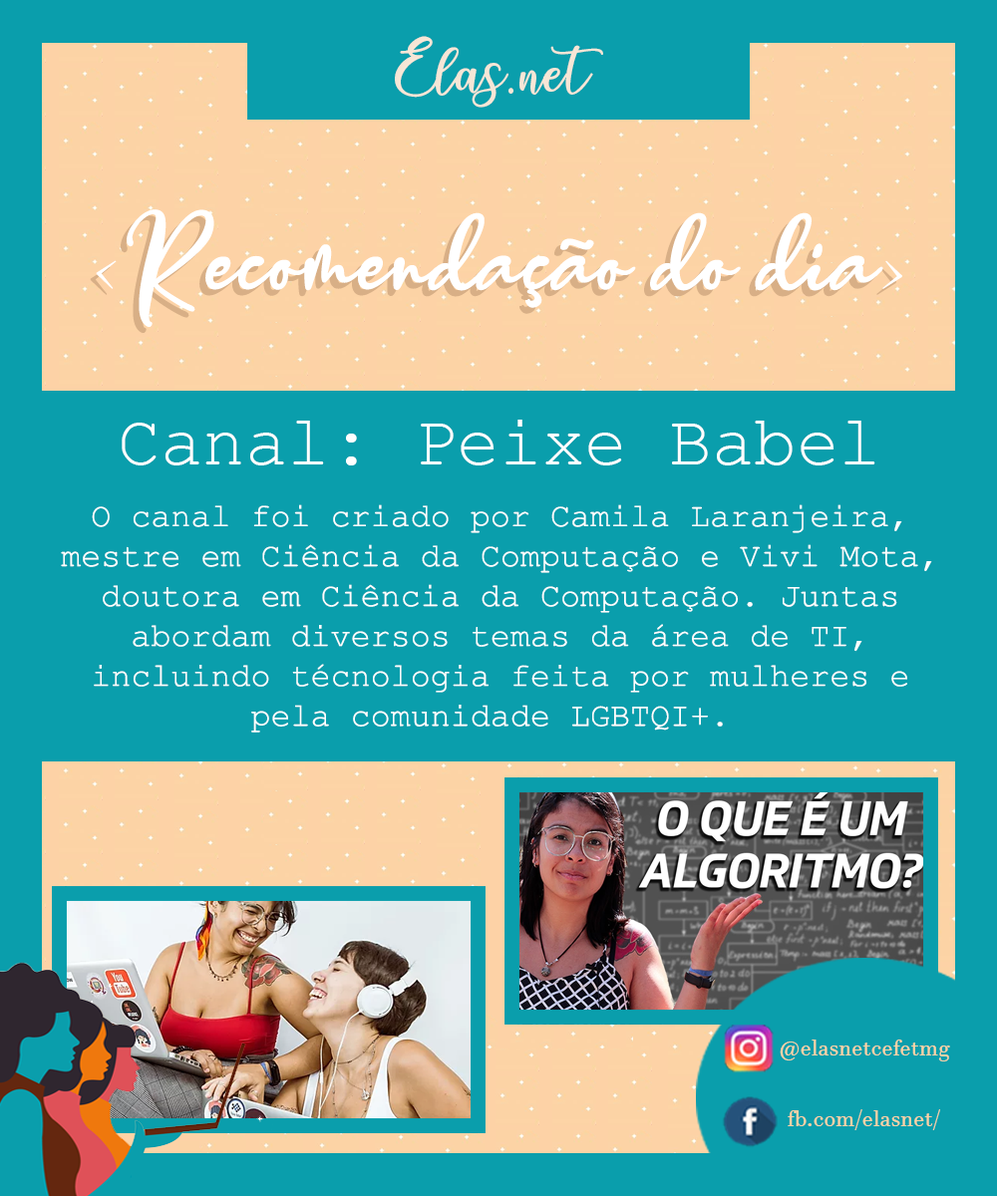
<style>
.page{position:relative;width:997px;height:1196px;background:#0a9eac}
.page>*{position:absolute;margin:0}
.t1{font:55.8px "charlinda-Regular";color:#f7e6d6}
.t2{font:95.6px "valentinevibes";color:#ffffff}
.t3{font:95.6px "MaheisaScript";color:#ffffff}
.t4{font:95.6px "valentinevibes"}
.t5{font:95.6px "MaheisaScript"}
.t6{font:70.7px "CourierNewPSMT";color:#ffffff}
.t7{font:33.3px "CourierNewPSMT";color:#ffffff}
.t8{font:23.3px "JavaneseText";color:#fdd3a6}
</style>
<div class="page">
<p class="t1" style="left:395px;top:36px;width:208px;height:72px">Elas.net</p>
<p class="t2" style="left:96px;top:209px;width:806px;height:119px"><span class="t3">&lt;</span>Recomendação do dia<span class="t3">&gt;</span></p>
<p class="t4" style="left:90px;top:215px;width:806px;height:119px"><span class="t5">&lt;</span>Recomendação do dia<span class="t5">&gt;</span></p>
<p class="t6" style="left:122px;top:420px;width:753px;height:46px">Canal: Peixe Babel</p>
<p class="t7" style="left:61px;top:504px;width:871px;height:229px;text-align:center">O canal foi criado por Camila Laranjeira, <br>mestre em Ciência da Computação e Vivi Mota, <br>doutora em Ciência da Computação. Juntas <br>abordam diversos temas da área de TI, <br>incluindo técnologia feita por mulheres e <br>pela comunidade LGBTQI+.</p>
<p class="t8" style="left:780px;top:1040px;width:170px;height:22px">@elasnetcefetmg</p>
<p class="t8" style="left:788px;top:1109px;width:152px;height:21px">fb.com/elasnet/</p>
</div>
